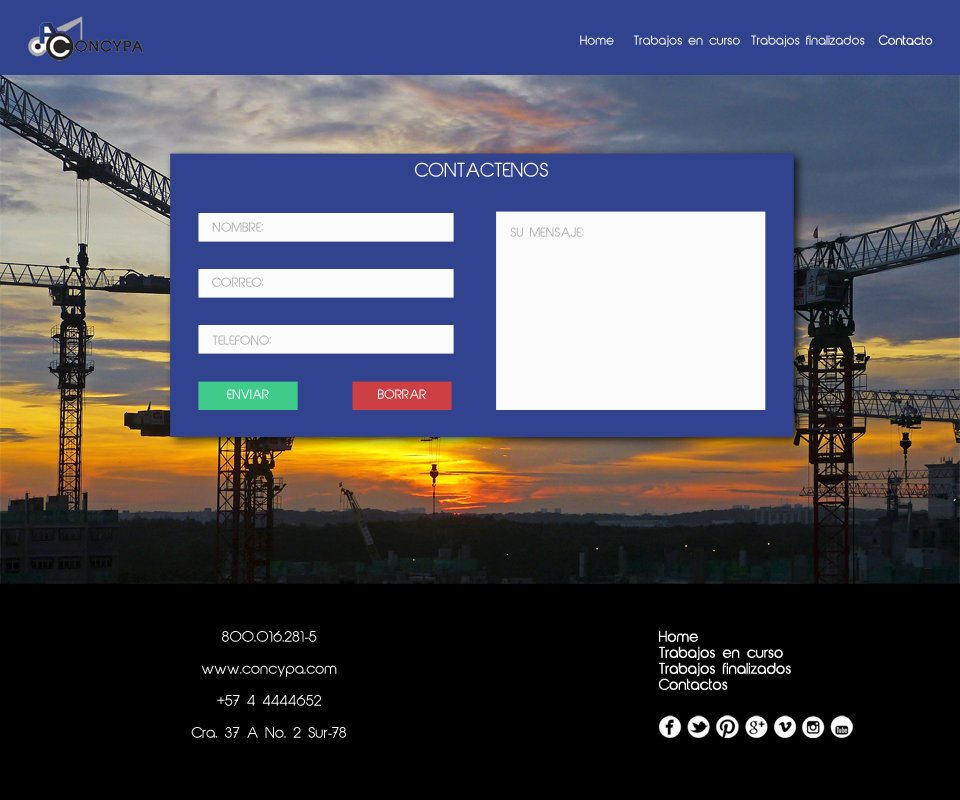
<style>
.page{position:relative;width:960px;height:800px;background:#000000}
.page>*{position:absolute;margin:0}
.t1{font:12px "AbeatbyKai"}
.t2{font:12px "AbeatbyKai";color:#ffffff}
.t3{font:18px "AbeatbyKai";color:#fcfcfc}
.t4{font:12px "AbeatbyKai";color:#b5b5b5}
.t5{font:12px "AbeatbyKai";color:#fcfcfc}
.t6{font:14px/16px "AbeatbyKai";color:#fcfcfc}
.t7{font:14px/16px "MyriadPro-Regular";color:#fcfcfc}
</style>
<div class="page">
<p class="t1" style="left:580px;top:35px;width:34px;height:10px">Home</p>
<p class="t2" style="left:633px;top:35px;width:107px;height:12px">Trabajos en curso</p>
<p class="t2" style="left:751px;top:35px;width:114px;height:12px">Trabajos finalizados</p>
<p class="t2" style="left:878px;top:35px;width:55px;height:10px">Contacto</p>
<p class="t3" style="left:415px;top:162px;width:133px;height:15px">CONTACTENOS</p>
<p class="t4" style="left:212px;top:222px;width:51px;height:10px">NOMBRE:</p>
<p class="t4" style="left:510px;top:227px;width:74px;height:10px">SU MENSAJE:</p>
<p class="t4" style="left:212px;top:277px;width:52px;height:10px">CORREO:</p>
<p class="t4" style="left:212px;top:335px;width:59px;height:10px">TELEFONO:</p>
<p class="t5" style="left:227px;top:389px;width:42px;height:10px">ENVIAR</p>
<p class="t5" style="left:378px;top:389px;width:48px;height:10px">BORRAR</p>
<p class="t6" style="left:659px;top:630px;width:132px;height:60px">Home<br>Trabajos en curso<br>Trabajos finalizados<br>Contactos</p>
<p class="t6" style="left:191px;top:631px;width:155px;height:107px;text-align:center">800.016.281<span class="t7">-</span>5<br><br>www.concypa.com<br><br>+57 4 4444652 <br><br>Cra. 37 A No. 2 Sur<span class="t7">-</span>78</p>
</div>
